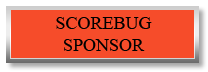
<style>
.page{position:relative;width:208px;height:72px;background:#f64c2a}
.page>*{position:absolute;margin:0}
.t1{font:18px "TimesNewRomanPSMT";color:#000000}
</style>
<div class="page">
<p class="t1" style="left:56px;top:17px;width:96px;height:34px;text-align:center">SCOREBUG<br>SPONSOR</p>
</div>
